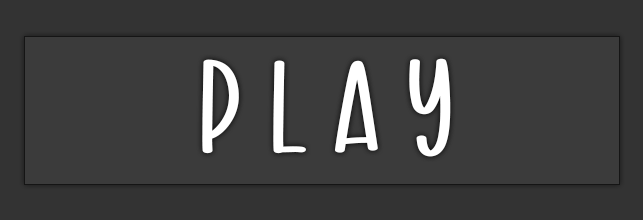
<style>
.page{position:relative;width:643px;height:220px;background:#3b3b3b}
.page>*{position:absolute;margin:0}
.t1{font:126.8px "FarmhouseRegular";letter-spacing:0.24em;color:#ffffff}
</style>
<div class="page">
<p class="t1" style="left:202px;top:58px;width:249px;height:99px">PLAY</p>
</div>
